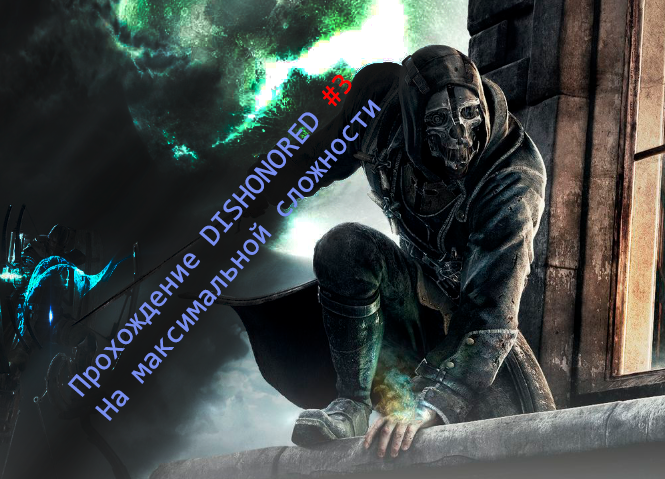
<style>
.page{position:relative;width:665px;height:479px}
.page>*{position:absolute;margin:0}
.t1{font:30.3px "Consolas";color:#788eef}
.t2{font:30.3px "Consolas";color:#ff0000}
</style>
<div class="page">
<p class="t1" style="left:67px;top:74px;width:314px;height:347px;text-align:center;rotate:-49deg">Прохождение DISHONORED <span class="t2">#3</span> <br>На максимальной сложности</p>
</div>
